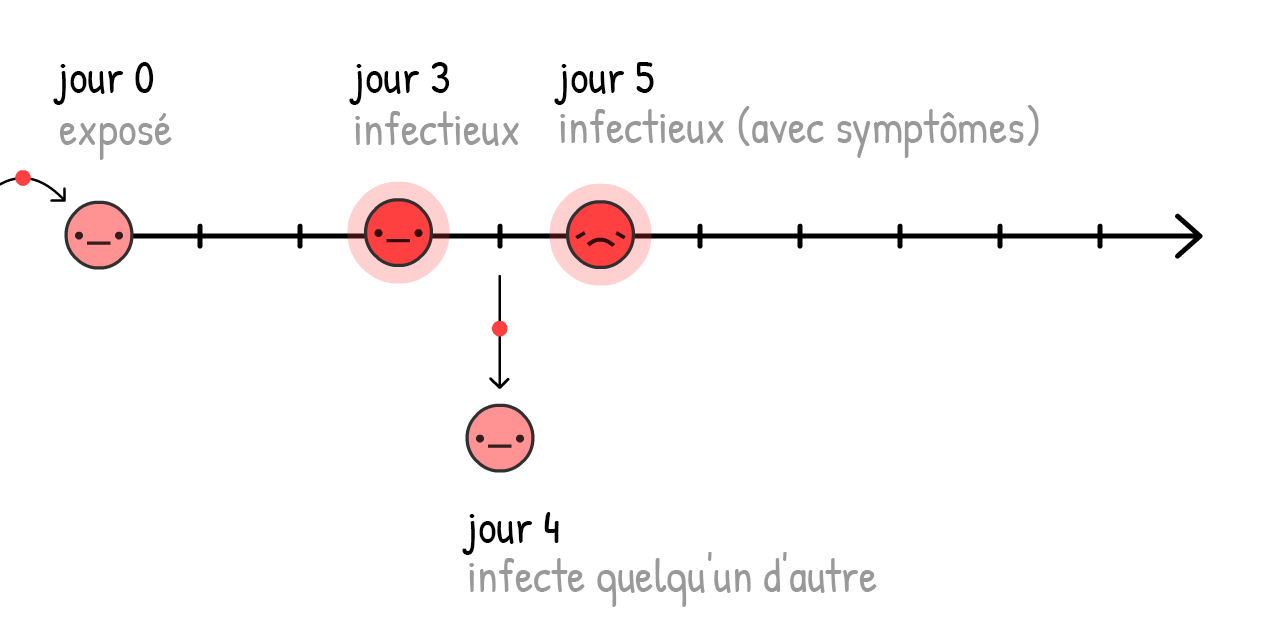
<style>
.page{position:relative;width:1280px;height:640px;background:#ffffff}
.page>*{position:absolute;margin:0}
.t1{font:79px "PatrickHand-Regular";color:#000000}
.t2{font:79px "PatrickHand-Regular";color:#999999}
</style>
<div class="page">
<p class="t1" style="left:53px;top:62px;width:101px;height:43px">jour 0</p>
<p class="t1" style="left:349px;top:62px;width:101px;height:43px">jour 3</p>
<p class="t1" style="left:554px;top:62px;width:100px;height:43px">jour 5</p>
<p class="t2" style="left:59px;top:113px;width:113px;height:47px">exposé</p>
<p class="t2" style="left:355px;top:111px;width:164px;height:35px">infectieux</p>
<p class="t2" style="left:560px;top:105px;width:479px;height:53px">infectieux (avec symptômes)</p>
<p class="t1" style="left:462px;top:512px;width:97px;height:43px">jour 4</p>
<p class="t2" style="left:469px;top:552px;width:408px;height:55px">infecte quelqu'un d'autre</p>
</div>
